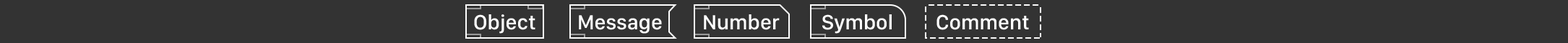
<style>
.page{position:relative;width:1568px;height:43px;background:#333333}
.page>*{position:absolute;margin:0}
.t1{font:21.5px "SFCompactDisplay-Medium";color:#ffffff}
</style>
<div class="page">
<p class="t1" style="left:474px;top:14px;width:61px;height:20px">Object</p>
<p class="t1" style="left:579px;top:15px;width:83px;height:19px">Message</p>
<p class="t1" style="left:704px;top:14px;width:76px;height:16px">Number</p>
<p class="t1" style="left:822px;top:14px;width:70px;height:20px">Symbol</p>
<p class="t1" style="left:936px;top:14px;width:93px;height:16px">Comment</p>
</div>
